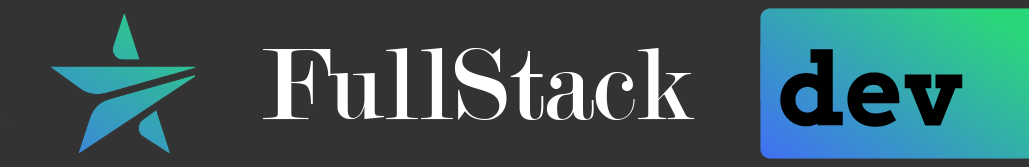
<style>
.page{position:relative;width:1029px;height:167px;background:#333333}
.page>*{position:absolute;margin:0}
.t1{font:108.3px "Modern-Regular";color:#ffffff}
</style>
<div class="page">
<p class="t1" style="left:263px;top:48px;width:432px;height:72px">FullStack</p>
</div>
